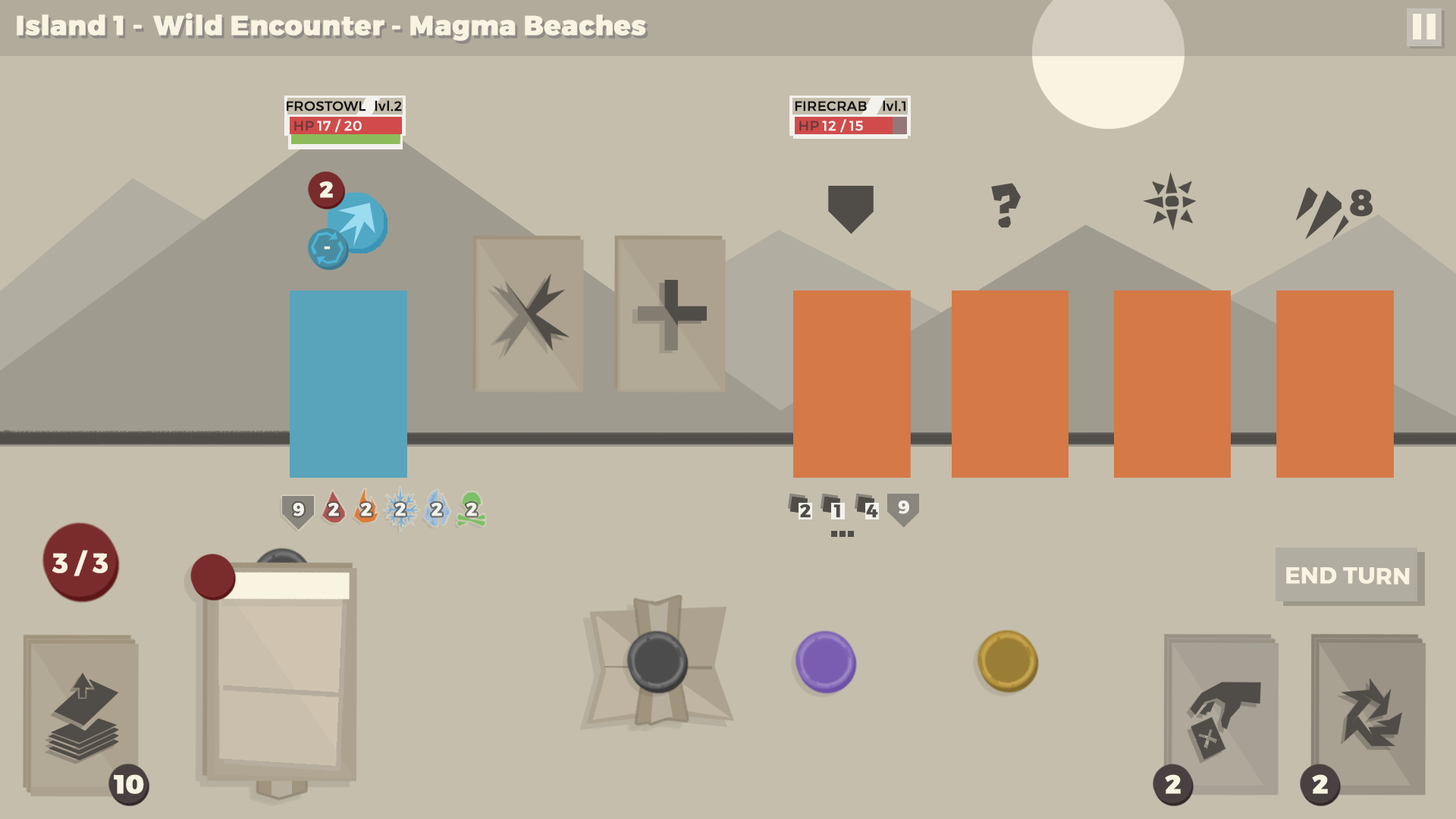
<style>
.page{position:relative;width:1456px;height:819px;background:#c5beac}
.page>*{position:absolute;margin:0}
.t1{font:27.3px "Montserrat-ExtraBold";color:#f9f3e1;font-weight:bold}
.t2{font:13.6px "Montserrat-Regular";color:#121212;font-weight:bold}
.t3{font:13.6px "Montserrat-Regular";color:#6b3b3b;font-weight:bold}
.t4{font:13.6px "Montserrat-Regular";color:#f3f2ed;font-weight:bold}
.t5{font:22.2px "Montserrat-ExtraBold";color:#f9f3e1;font-weight:bold}
.t6{font:36.4px "Montserrat-ExtraBold";color:#504d48;font-weight:bold}
.t7{font:18.2px "Montserrat-ExtraBold";color:#f9f3e1;font-weight:bold}
.t8{font:18.2px "Montserrat-Bold";color:#f3f2ed;font-weight:bold}
.t9{font:18.2px "Montserrat-Bold";color:#504d48;font-weight:bold}
.t10{font:27.3px "Montserrat-Bold";color:#f9f3e1;font-weight:bold}
.t11{font:22.7px "Montserrat-SemiBold";color:#f9f3e1;font-weight:bold}
.t12{font:26.1px "Montserrat-ExtraBold";color:#f9f3e1;font-weight:bold}
.t13{font:26px "Montserrat-ExtraBold";color:#f9f3e1;font-weight:bold}
</style>
<div class="page">
<p class="t1" style="left:17px;top:14px;width:125px;height:22px">Island 1 -</p>
<p class="t1" style="left:153px;top:13px;width:247px;height:23px">Wild Encounter -</p>
<p class="t1" style="left:410px;top:14px;width:236px;height:27px">Magma Beaches</p>
<p class="t2" style="left:287px;top:101px;width:79px;height:10px">FROSTOWL</p>
<p class="t2" style="left:375px;top:100px;width:27px;height:11px">lvl.2</p>
<p class="t2" style="left:795px;top:101px;width:72px;height:10px">FIRECRAB</p>
<p class="t2" style="left:883px;top:100px;width:22px;height:11px">lvl.1</p>
<p class="t3" style="left:294px;top:121px;width:20px;height:10px">HP</p>
<p class="t4" style="left:317px;top:119px;width:45px;height:14px">17 / 20</p>
<p class="t3" style="left:799px;top:121px;width:20px;height:10px">HP</p>
<p class="t4" style="left:822px;top:119px;width:41px;height:14px">12 / 15</p>
<p class="t5" style="left:319px;top:181px;width:14px;height:17px">2</p>
<p class="t6" style="left:1350px;top:189px;width:23px;height:28px">8</p>
<p class="t7" style="left:324px;top:246px;width:6px;height:3px">-</p>
<p class="t8" style="left:293px;top:503px;width:11px;height:13px">9</p>
<p class="t8" style="left:328px;top:503px;width:11px;height:13px">2</p>
<p class="t8" style="left:361px;top:503px;width:11px;height:13px">2</p>
<p class="t8" style="left:395px;top:503px;width:11px;height:13px">2</p>
<p class="t8" style="left:431px;top:503px;width:11px;height:13px">2</p>
<p class="t8" style="left:466px;top:503px;width:11px;height:13px">2</p>
<p class="t9" style="left:800px;top:504px;width:11px;height:14px">2</p>
<p class="t9" style="left:833px;top:504px;width:7px;height:14px">1</p>
<p class="t9" style="left:866px;top:504px;width:12px;height:14px">4</p>
<p class="t8" style="left:898px;top:500px;width:11px;height:14px">9</p>
<p class="t10" style="left:52px;top:550px;width:56px;height:26px">3 / 3</p>
<p class="t11" style="left:1286px;top:567px;width:124px;height:18px">END TURN</p>
<p class="t12" style="left:114px;top:774px;width:30px;height:20px">10</p>
<p class="t13" style="left:1165px;top:774px;width:16px;height:20px">2</p>
<p class="t13" style="left:1312px;top:774px;width:16px;height:20px">2</p>
</div>
